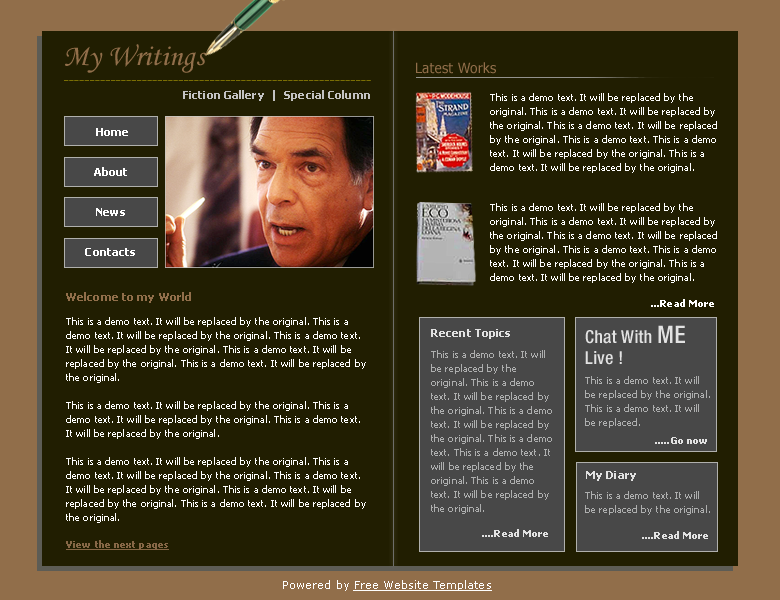
<style>
.page{position:relative;width:780px;height:600px;background:#211e01}
.page>*{position:absolute;margin:0}
.t1{font:30px "MonotypeCorsiva";letter-spacing:0.01em;color:#916e4a}
.t2{font:14px "Tahoma";letter-spacing:0.01em;color:#916e4a}
.t3{font:11px "Tahoma-Bold";letter-spacing:0.01em;color:#c3c2c2}
.t4{font:10px/14px "Tahoma";letter-spacing:0.01em;color:#ffffff}
.t5{font:11px/40px "Tahoma-Bold";letter-spacing:0.01em;color:#ffffff}
.t6{font:11px "Tahoma-Bold";letter-spacing:0.01em;color:#916e4a}
.t7{font:10px "Tahoma-Bold";letter-spacing:0.01em;color:#ffffff}
.t8{font:11px "Tahoma-Bold";letter-spacing:0.01em;color:#e2e2e2}
.t9{font:18px/21px "HelveticaNeue-MediumCond";letter-spacing:0.01em;color:#e2e2e2}
.t10{font:24px/21px "HelveticaNeue-MediumCond";letter-spacing:0.01em;color:#e2e2e2}
.t11{font:10px/14px "Tahoma";letter-spacing:0.01em;color:#aeafaf}
.t12{font:10px "Tahoma-Bold";letter-spacing:0.01em;color:#e2e2e2}
.t13{font:10px "Tahoma-Bold";letter-spacing:0.01em;color:#866746;text-decoration:underline}
.t14{font:11px "Verdana";letter-spacing:0.01em;color:#fefefe;text-decoration:underline}
.t15{font:11px "Verdana";letter-spacing:0.01em;color:#fefefe}
</style>
<div class="page">
<p class="t1" style="left:65px;top:44px;width:142px;height:29px">My Writings</p>
<p class="t2" style="left:416px;top:62px;width:80px;height:12px">Latest Works</p>
<p class="t3" style="left:183px;top:90px;width:187px;height:11px">Fiction Gallery  |  Special Column</p>
<p class="t4" style="left:490px;top:93px;width:227px;height:80px">This is a demo text. It will be replaced by the original. This is a demo text. It will be replaced by the original. This is a demo text. It will be replaced by the original. This is a demo text. This is a demo text. It will be replaced by the original. This is a demo text. It will be replaced by the original.</p>
<p class="t5" style="left:85px;top:128px;width:50px;height:128px;text-align:center">Home<br>About<br>News<br>Contacts</p>
<p class="t4" style="left:490px;top:203px;width:227px;height:80px">This is a demo text. It will be replaced by the original. This is a demo text. It will be replaced by the original. This is a demo text. It will be replaced by the original. This is a demo text. This is a demo text. It will be replaced by the original. This is a demo text. It will be replaced by the original.</p>
<p class="t6" style="left:66px;top:292px;width:125px;height:11px">Welcome to my World</p>
<p class="t7" style="left:651px;top:299px;width:63px;height:8px">...Read More</p>
<p class="t4" style="left:66px;top:317px;width:300px;height:206px">This is a demo text. It will be replaced by the original. This is a demo text. It will be replaced by the original. This is a demo text. It will be replaced by the original. This is a demo text. It will be replaced by the original. This is a demo text. It will be replaced by the original.<br><br>This is a demo text. It will be replaced by the original. This is a demo text. It will be replaced by the original. This is a demo text. It will be replaced by the original. <br><br>This is a demo text. It will be replaced by the original. This is a demo text. It will be replaced by the original. This is a demo text. It will be replaced by the original. This is a demo text. It will be replaced by the original. This is a demo text. It will be replaced by the original.<br><br>This is a demo text. It will be replaced by the original. This is a demo text. It will be replaced by the original. This is a demo text. It will be replaced by the original.</p>
<p class="t8" style="left:431px;top:329px;width:79px;height:10px">Recent Topics</p>
<p class="t9" style="left:585px;top:325px;width:100px;height:40px">Chat With <span class="t10">ME <br></span>Live !</p>
<p class="t11" style="left:431px;top:350px;width:121px;height:164px">This is a demo text. It will be replaced by the original. This is a demo text. It will be replaced by the original. This is a demo text. It will be replaced by the original. This is a demo text. This is a demo text. It will be replaced by the original. This is a demo text. It will be replaced by the original.</p>
<p class="t11" style="left:585px;top:376px;width:125px;height:52px">This is a demo text. It will be replaced by the original. This is a demo text. It will be replaced.</p>
<p class="t12" style="left:655px;top:437px;width:52px;height:7px">.....Go now</p>
<p class="t8" style="left:586px;top:471px;width:50px;height:10px">My Diary</p>
<p class="t11" style="left:585px;top:491px;width:125px;height:24px">This is a demo text. It will be replaced by the original.</p>
<p class="t12" style="left:482px;top:529px;width:66px;height:8px">....Read More</p>
<p class="t12" style="left:642px;top:531px;width:66px;height:8px">....Read More</p>
<p class="t13" style="left:66px;top:540px;width:103px;height:10px">View the next pages</p>
<p class="t14" style="left:283px;top:580px;width:209px;height:11px"><span class="t15">Powered by </span>Free Website Templates</p>
</div>
